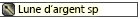
<style>
.page{position:relative;width:140px;height:19px;background:#ffffff}
.page>*{position:absolute;margin:0}
.t1{font:10.9px "LaoUI";color:#000000}
</style>
<div class="page">
<p class="t1" style="left:18px;top:5px;width:81px;height:10px">Lune d’argent sp</p>
</div>
